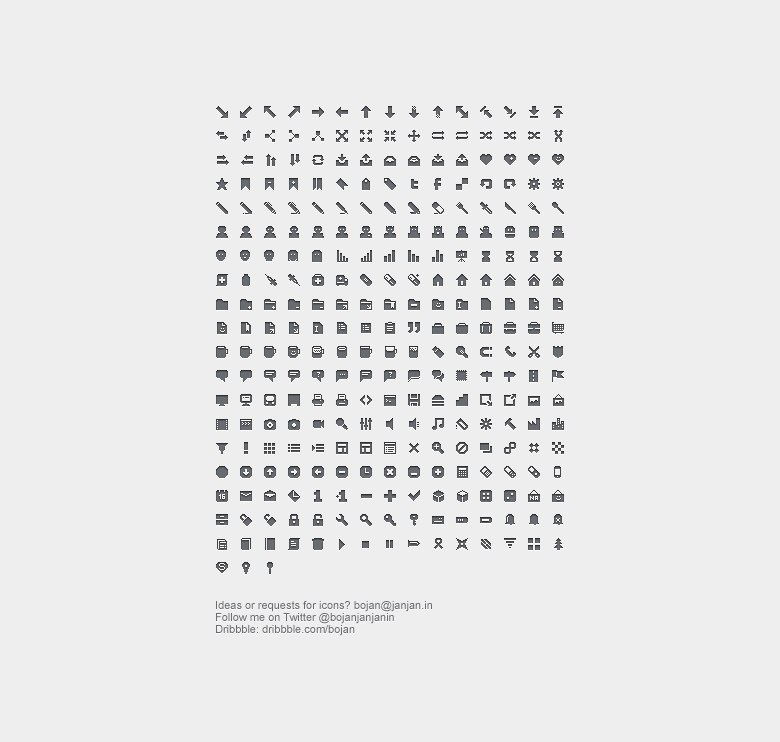
<style>
.page{position:relative;width:780px;height:742px;background:#eeeeee}
.page>*{position:absolute;margin:0}
.t1{font:11px/12px "ArialMT";color:#686b6f}
</style>
<div class="page">
<p class="t1" style="left:216px;top:601px;width:216px;height:35px">Ideas or requests for icons? bojan@janjan.in<br>Follow me on Twitter @bojanjanjanin<br>Dribbble: dribbble.com/bojan</p>
</div>
